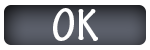
<style>
.page{position:relative;width:150px;height:50px;background:#ffffff}
.page>*{position:absolute;margin:0}
.t1{font:48px "TektonPro-BoldCond";color:#ffffff}
</style>
<div class="page">
<p class="t1" style="left:53px;top:8px;width:45px;height:33px">OK</p>
</div>
